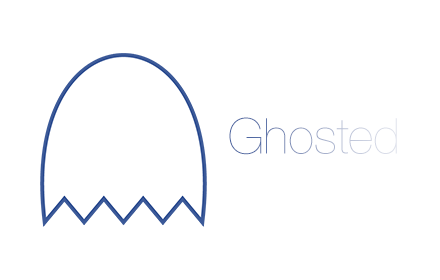
<style>
.page{position:relative;width:440px;height:280px;background:#ffffff}
.page>*{position:absolute;margin:0}
.t1{font:49.2px "HelveticaNeue-UltraLight"}
</style>
<div class="page">
<p class="t1" style="left:229px;top:117px;width:168px;height:38px">Ghosted</p>
</div>
